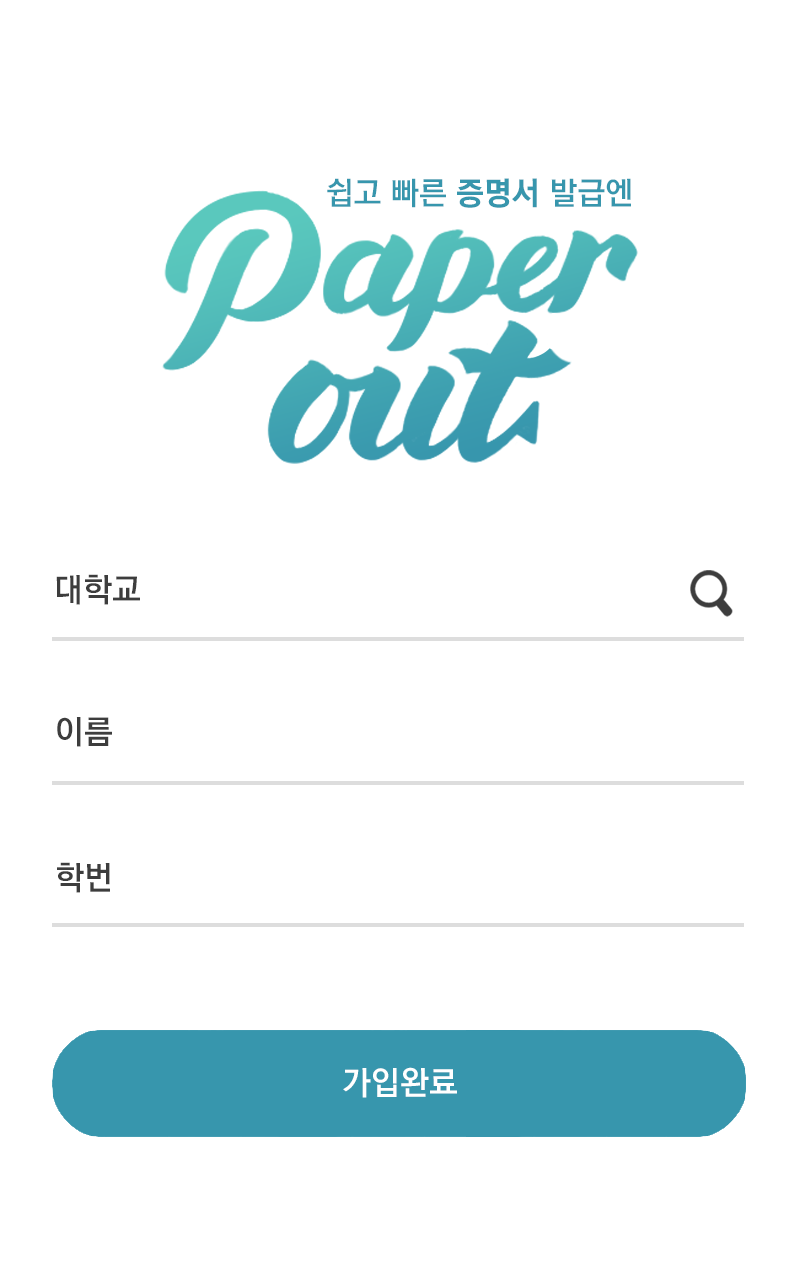
<style>
.page{position:relative;width:800px;height:1280px;background:#ffffff}
.page>*{position:absolute;margin:0}
.t1{font:31.9px "KoreanGD15-R";color:#3796ad}
.t2{font:31.9px "KoreanGD17-R";color:#3796ad}
.t3{font:33px "KoreanGD15-R";color:#3d3d3d}
.t4{font:33px "KoreanGD15-R";color:#ffffff}
</style>
<div class="page">
<p class="t1" style="left:327px;top:178px;width:304px;height:30px">쉽고 빠른 <span class="t2">증명서 </span>발급엔</p>
<p class="t3" style="left:56px;top:574px;width:84px;height:31px">대학교</p>
<p class="t3" style="left:57px;top:717px;width:55px;height:30px">이름</p>
<p class="t3" style="left:57px;top:862px;width:53px;height:31px">학번</p>
<p class="t4" style="left:343px;top:1067px;width:114px;height:31px">가입완료</p>
</div>
